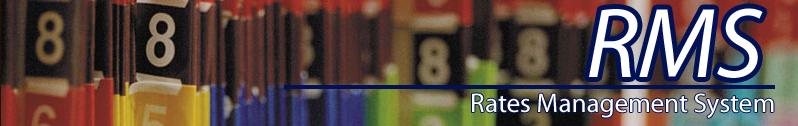
<style>
.page{position:relative;width:798px;height:126px}
.page>*{position:absolute;margin:0}
.t1{font:100px "Myriad-Italic";color:#ffffff}
.t2{font:27px "Myriad-Roman";color:#fefefe}
</style>
<div class="page">
<p class="t1" style="left:589px;top:8px;width:174px;height:70px">RMS</p>
<p class="t2" style="left:472px;top:93px;width:302px;height:25px">Rates Management System</p>
</div>
